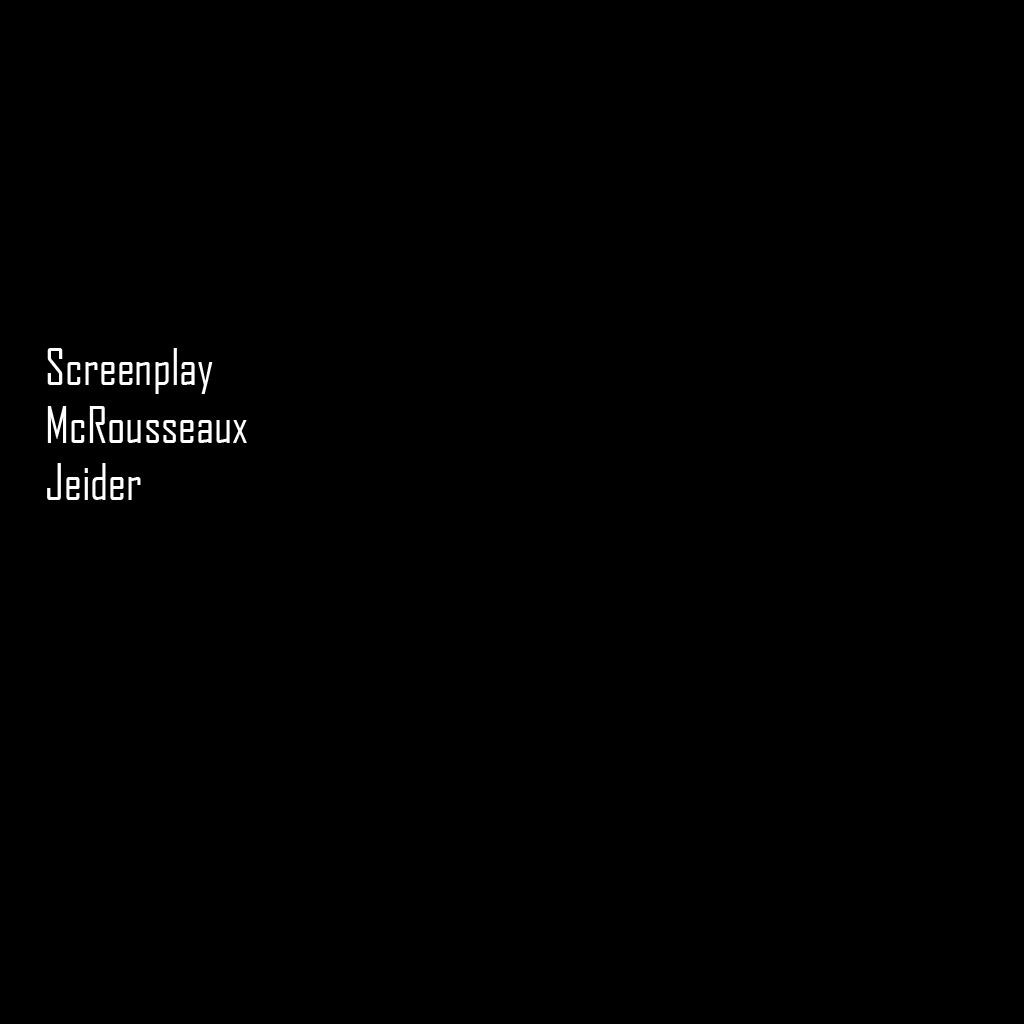
<style>
.page{position:relative;width:1024px;height:1024px;background:#000000}
.page>*{position:absolute;margin:0}
.t1{font:48px "AgencyFBCyrillic";color:#ffffff}
</style>
<div class="page">
<p class="t1" style="left:47px;top:348px;width:200px;height:152px">Screenplay<br>McRousseaux<br>Jeider</p>
</div>
